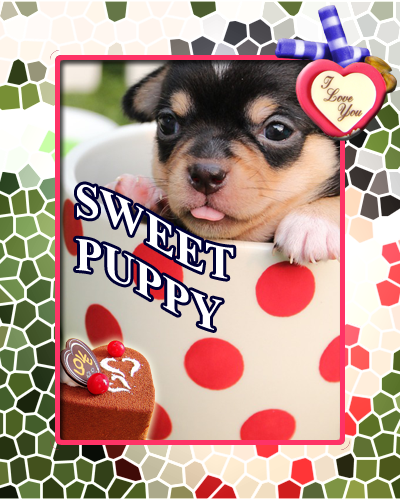
<style>
.page{position:relative;width:400px;height:500px}
.page>*{position:absolute;margin:0}
.t1{font:45px "TimesNewRomanPS-BoldMT";color:#ffffff}
</style>
<div class="page">
<p class="t1" style="left:76px;top:184px;width:158px;height:146px">SWEET<br>PUPPY</p>
</div>
